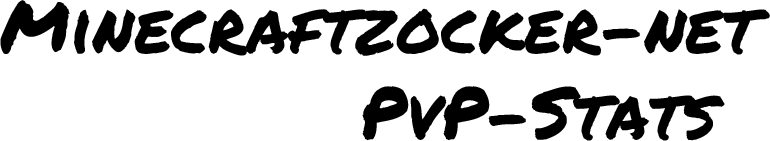
<style>
.page{position:relative;width:770px;height:141px;background:#ffffff}
.page>*{position:absolute;margin:0}
.t1{font:72px "PermanentMarker";color:#000000}
</style>
<div class="page">
<p class="t1" style="left:0px;top:0px;width:770px;height:141px;text-align:center">Minecraftzocker-net<br>            PvP-Stats</p>
</div>
